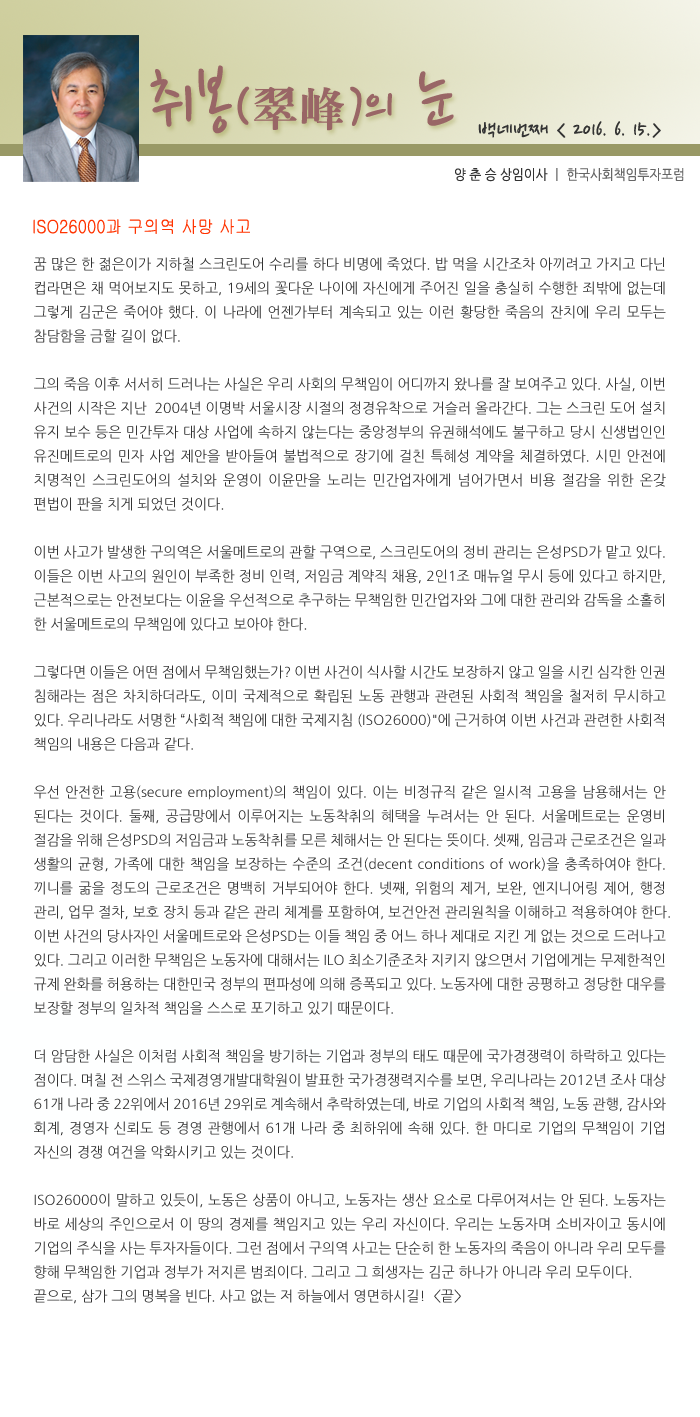
<style>
.page{position:relative;width:700px;height:1417px;background:#ffffff}
.page>*{position:absolute;margin:0}
.t1{font:77.5px "NanumPen";color:#996666}
.t2{font:60px "NanumPen";color:#996666}
.t3{font:48px "H2mjrE";color:#996666}
.t4{font:24px "NanumPen";color:#333333}
.t5{font:14px "NanumGothic";color:#666666;scale:0.9 1}
.t6{font:14px "NanumGothic";color:#333333;scale:0.9 1}
.t7{font:18px "Gulim";color:#ff3300;scale:0.9 1}
.t8{font:14px/24px "NanumGothic";color:#333333}
</style>
<div class="page">
<p class="t1" style="left:150px;top:65px;width:304px;height:69px">취봉<span class="t2">(</span><span class="t3">翠峰</span><span class="t2">)</span><span class="t2">의</span> 눈</p>
<p class="t4" style="left:478px;top:121px;width:183px;height:17px">백네번째 &lt; 2016. 6. 15.&gt;</p>
<p class="t5" style="left:455px;top:168px;width:229px;height:14px"><span class="t6">양 춘 승 상임이사 </span>ㅣ 한국사회책임투자포럼</p>
<p class="t7" style="left:33px;top:219px;width:217px;height:15px">ISO26000과 구의역 사망 사고</p>
<p class="t8" style="left:34px;top:257px;width:636px;height:1047px;text-align:justify">꿈 많은 한 젊은이가 지하철 스크린도어 수리를 하다 비명에 죽었다. 밥 먹을 시간조차 아끼려고 가지고 다닌 컵라면은 채 먹어보지도 못하고, 19세의 꽃다운 나이에 자신에게 주어진 일을 충실히 수행한 죄밖에 없는데 그렇게 김군은 죽어야 했다. 이 나라에 언젠가부터 계속되고 있는 이런 황당한 죽음의 잔치에 우리 모두는 참담함을 금할 길이 없다.<br><br>그의 죽음 이후 서서히 드러나는 사실은 우리 사회의 무책임이 어디까지 왔나를 잘 보여주고 있다. 사실, 이번 사건의 시작은 지난  2004년 이명박 서울시장 시절의 정경유착으로 거슬러 올라간다. 그는 스크린 도어 설치 유지 보수 등은 민간투자 대상 사업에 속하지 않는다는 중앙정부의 유권해석에도 불구하고 당시 신생법인인 유진메트로의 민자 사업 제안을 받아들여 불법적으로 장기에 걸친 특혜성 계약을 체결하였다. 시민 안전에 치명적인 스크린도어의 설치와 운영이 이윤만을 노리는 민간업자에게 넘어가면서 비용 절감을 위한 온갖 편법이 판을 치게 되었던 것이다. <br><br>이번 사고가 발생한 구의역은 서울메트로의 관할 구역으로, 스크린도어의 정비 관리는 은성PSD가 맡고 있다. 이들은 이번 사고의 원인이 부족한 정비 인력, 저임금 계약직 채용, 2인1조 매뉴얼 무시 등에 있다고 하지만, 근본적으로는 안전보다는 이윤을 우선적으로 추구하는 무책임한 민간업자와 그에 대한 관리와 감독을 소홀히 한 서울메트로의 무책임에 있다고 보아야 한다.<br><br>그렇다면 이들은 어떤 점에서 무책임했는가? 이번 사건이 식사할 시간도 보장하지 않고 일을 시킨 심각한 인권 침해라는 점은 차치하더라도, 이미 국제적으로 확립된 노동 관행과 관련된 사회적 책임을 철저히 무시하고 있다. 우리나라도 서명한 “사회적 책임에 대한 국제지침 (ISO26000)"에 근거하여 이번 사건과 관련한 사회적 책임의 내용은 다음과 같다. <br><br>우선 안전한 고용(secure employment)의 책임이 있다. 이는 비정규직 같은 일시적 고용을 남용해서는 안 된다는 것이다. 둘째, 공급망에서 이루어지는 노동착취의 혜택을 누려서는 안 된다. 서울메트로는 운영비 절감을 위해 은성PSD의 저임금과 노동착취를 모른 체해서는 안 된다는 뜻이다. 셋째, 임금과 근로조건은 일과 생활의 균형, 가족에 대한 책임을 보장하는 수준의 조건(decent conditions of work)을 충족하여야 한다. 끼니를 굶을 정도의 근로조건은 명백히 거부되어야 한다. 넷째, 위험의 제거, 보완, 엔지니어링 제어, 행정 관리, 업무 절차, 보호 장치 등과 같은 관리 체계를 포함하여, 보건안전 관리원칙을 이해하고 적용하여야 한다. <br>이번 사건의 당사자인 서울메트로와 은성PSD는 이들 책임 중 어느 하나 제대로 지킨 게 없는 것으로 드러나고 있다. 그리고 이러한 무책임은 노동자에 대해서는 ILO 최소기준조차 지키지 않으면서 기업에게는 무제한적인 규제 완화를 허용하는 대한민국 정부의 편파성에 의해 증폭되고 있다. 노동자에 대한 공평하고 정당한 대우를 보장할 정부의 일차적 책임을 스스로 포기하고 있기 때문이다.<br><br>더 암담한 사실은 이처럼 사회적 책임을 방기하는 기업과 정부의 태도 때문에 국가경쟁력이 하락하고 있다는 점이다. 며칠 전 스위스 국제경영개발대학원이 발표한 국가경쟁력지수를 보면, 우리나라는 2012년 조사 대상 61개 나라 중 22위에서 2016년 29위로 계속해서 추락하였는데, 바로 기업의 사회적 책임, 노동 관행, 감사와 회계, 경영자 신뢰도 등 경영 관행에서 61개 나라 중 최하위에 속해 있다. 한 마디로 기업의 무책임이 기업 자신의 경쟁 여건을 악화시키고 있는 것이다.<br><br>ISO26000이 말하고 있듯이, 노동은 상품이 아니고, 노동자는 생산 요소로 다루어져서는 안 된다. 노동자는 바로 세상의 주인으로서 이 땅의 경제를 책임지고 있는 우리 자신이다. 우리는 노동자며 소비자이고 동시에 기업의 주식을 사는 투자자들이다. 그런 점에서 구의역 사고는 단순히 한 노동자의 죽음이 아니라 우리 모두를 향해 무책임한 기업과 정부가 저지른 범죄이다. 그리고 그 희생자는 김군 하나가 아니라 우리 모두이다.<br>끝으로, 삼가 그의 명복을 빈다. 사고 없는 저 하늘에서 영면하시길!  &lt;끝&gt;</p>
</div>
